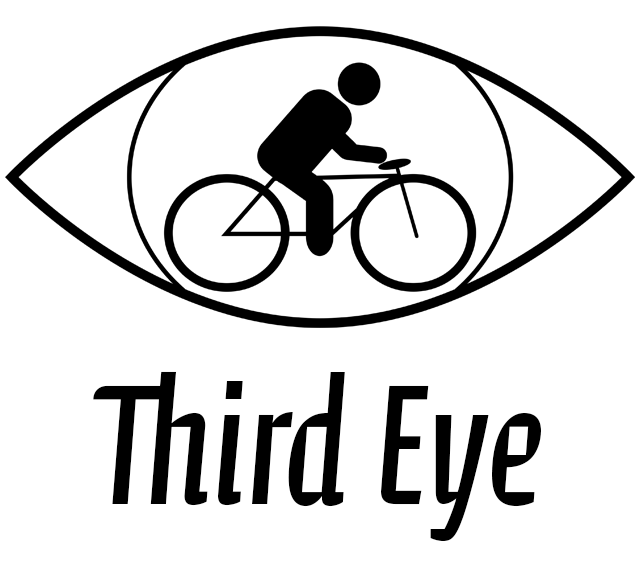
<style>
.page{position:relative;width:640px;height:576px;background:#ffffff}
.page>*{position:absolute;margin:0}
.t1{font:173.7px "CalcitePro-Regular";color:#000000}
</style>
<div class="page">
<p class="t1" style="left:93px;top:371px;width:448px;height:170px">Third Eye</p>
</div>
